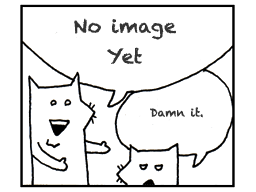
<style>
.page{position:relative;width:256px;height:192px;background:#ffffff}
.page>*{position:absolute;margin:0}
.t1{font:19px/30.5px "Chalkduster";letter-spacing:0.01em;color:#343434}
.t2{font:11.1px "Chalkduster";letter-spacing:0.01em;color:#343434}
</style>
<div class="page">
<p class="t1" style="left:74px;top:18px;width:102px;height:46px;text-align:center">No image<br>Yet</p>
<p class="t2" style="left:150px;top:107px;width:53px;height:11px">Damn it.</p>
</div>
